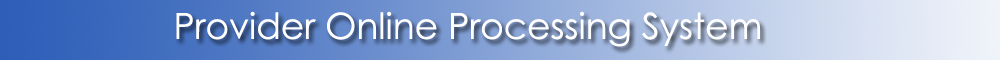
<style>
.page{position:relative;width:1000px;height:60px}
.page>*{position:absolute;margin:0}
.t1{font:36px "CenturyGothic";color:#ffffff}
</style>
<div class="page">
<p class="t1" style="left:176px;top:11px;width:584px;height:36px">Provider Online Processing System</p>
</div>
